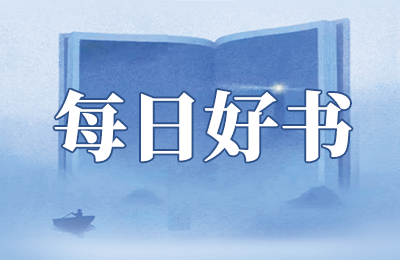
<style>
.page{position:relative;width:400px;height:260px}
.page>*{position:absolute;margin:0}
.t1{font:75px "SourceHanSerifSC-Heavy";letter-spacing:0.005em;color:#ffffff;text-transform:uppercase}
</style>
<div class="page">
<p class="t1" style="left:54px;top:89px;width:298px;height:73px">每日好书</p>
</div>
